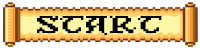
<style>
.page{position:relative;width:200px;height:50px;background:#ffffff}
.page>*{position:absolute;margin:0}
.t1{font:30px "Medieval-Pixel";color:#000000;scale:1.39 1}
</style>
<div class="page">
<p class="t1" style="left:37px;top:16px;width:125px;height:19px">START</p>
</div>
